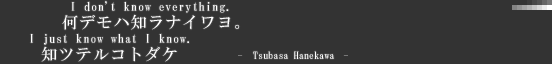
<style>
.page{position:relative;width:552px;height:64px;background:#333333}
.page>*{position:absolute;margin:0}
.t1{font:12px/32px "HGMinchoB";letter-spacing:0.075em;color:#ffffff}
.t2{font:16px/32px "HGMinchoB";letter-spacing:0.075em;color:#ffffff}
.t3{font:10px "HGMinchoB";letter-spacing:0.01em;color:#ffffff}
</style>
<div class="page">
<p class="t1" style="left:30px;top:1px;width:199px;height:44px">I don't know everything.<br>   I just know what I know.</p>
<p class="t2" style="left:41px;top:14px;width:199px;height:48px">何デモハ知ラナイワヨ。<br>    知ツテルコトダケ</p>
<p class="t3" style="left:253px;top:51px;width:81px;height:8px">Tsubasa Hanekawa</p>
</div>
